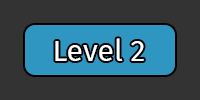
<style>
.page{position:relative;width:200px;height:100px;background:#333333}
.page>*{position:absolute;margin:0}
.t1{font:30px "FiraSans-Regular";color:#ffffff}
</style>
<div class="page">
<p class="t1" style="left:55px;top:38px;width:89px;height:23px">Level 2</p>
</div>
